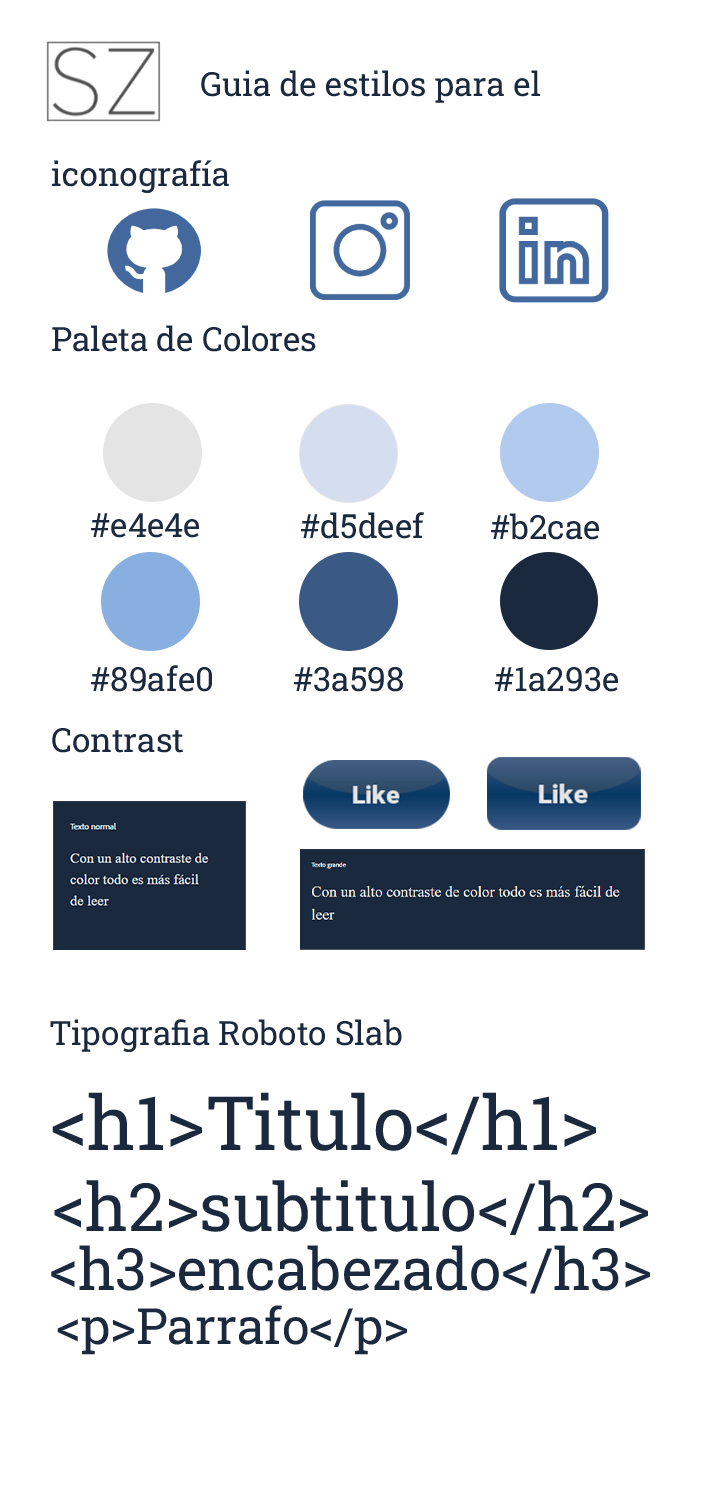
<style>
.page{position:relative;width:720px;height:1500px;background:#ffffff}
.page>*{position:absolute;margin:0}
.t1{font:33.3px "RobotoSlab-Regular";color:#1a293e}
.t2{font:75px "RobotoSlab-Regular";color:#1a293e}
.t3{font:66.7px "RobotoSlab-Regular";color:#1a293e}
.t4{font:58.3px "RobotoSlab-Regular";color:#1a293e}
.t5{font:50px "RobotoSlab-Regular";color:#1a293e}
</style>
<div class="page">
<p class="t1" style="left:201px;top:70px;width:339px;height:33px">Guia de estilos para el portfolio</p>
<p class="t1" style="left:52px;top:160px;width:177px;height:34px">iconografía</p>
<p class="t1" style="left:52px;top:325px;width:264px;height:27px">Paleta de Colores</p>
<p class="t1" style="left:91px;top:513px;width:108px;height:25px">#e4e4e4</p>
<p class="t1" style="left:301px;top:512px;width:123px;height:27px">#d5deef</p>
<p class="t1" style="left:491px;top:513px;width:108px;height:27px">#b2caee</p>
<p class="t1" style="left:91px;top:665px;width:121px;height:27px">#89afe0</p>
<p class="t1" style="left:294px;top:667px;width:109px;height:25px">#3a5985</p>
<p class="t1" style="left:495px;top:667px;width:123px;height:25px">#1a293e</p>
<p class="t1" style="left:52px;top:728px;width:131px;height:25px">Contraste</p>
<p class="t1" style="left:50px;top:1019px;width:352px;height:33px">Tipografia Roboto Slab</p>
<p class="t2" style="left:52px;top:1092px;width:544px;height:63px">&lt;h1&gt;Titulo&lt;/h1&gt;</p>
<p class="t3" style="left:54px;top:1180px;width:594px;height:55px">&lt;h2&gt;subtitulo&lt;/h2&gt;</p>
<p class="t4" style="left:51px;top:1245px;width:599px;height:49px">&lt;h3&gt;encabezado&lt;/h3&gt;</p>
<p class="t5" style="left:57px;top:1305px;width:350px;height:50px">&lt;p&gt;Parrafo&lt;/p&gt;</p>
</div>
